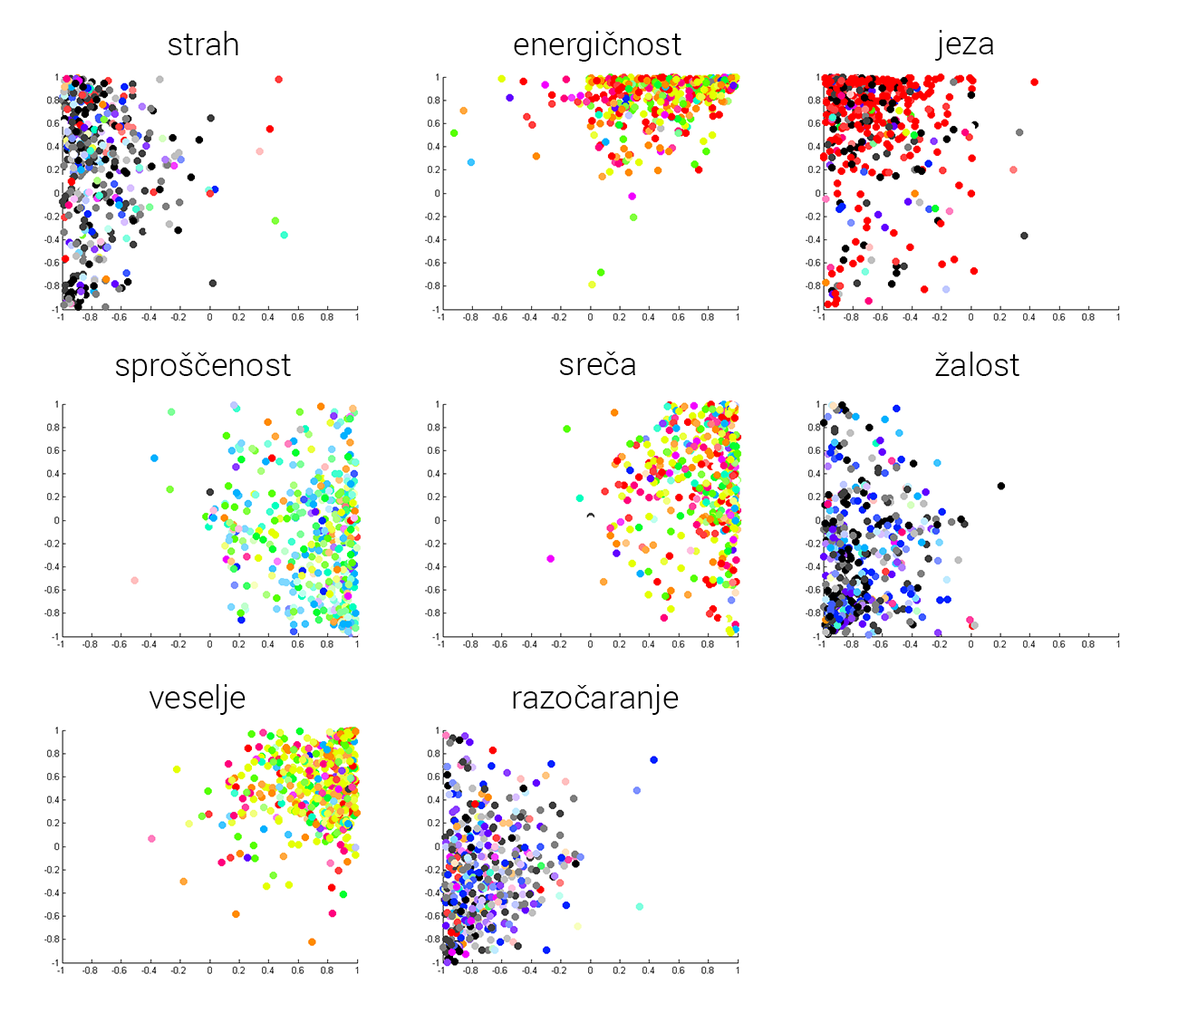
<style>
.page{position:relative;width:1178px;height:1013px;background:#ffffff}
.page>*{position:absolute;margin:0}
.t1{font:32.6px "Roboto-Light";color:#000000}
</style>
<div class="page">
<p class="t1" style="left:935px;top:30px;width:58px;height:31px">jeza</p>
<p class="t1" style="left:168px;top:31px;width:70px;height:24px">strah</p>
<p class="t1" style="left:514px;top:31px;width:167px;height:31px">energičnost</p>
<p class="t1" style="left:115px;top:352px;width:176px;height:30px">sproščenost</p>
<p class="t1" style="left:559px;top:351px;width:76px;height:24px">sreča</p>
<p class="t1" style="left:935px;top:351px;width:84px;height:25px">žalost</p>
<p class="t1" style="left:149px;top:684px;width:96px;height:31px">veselje</p>
<p class="t1" style="left:513px;top:684px;width:165px;height:31px">razočaranje</p>
</div>
